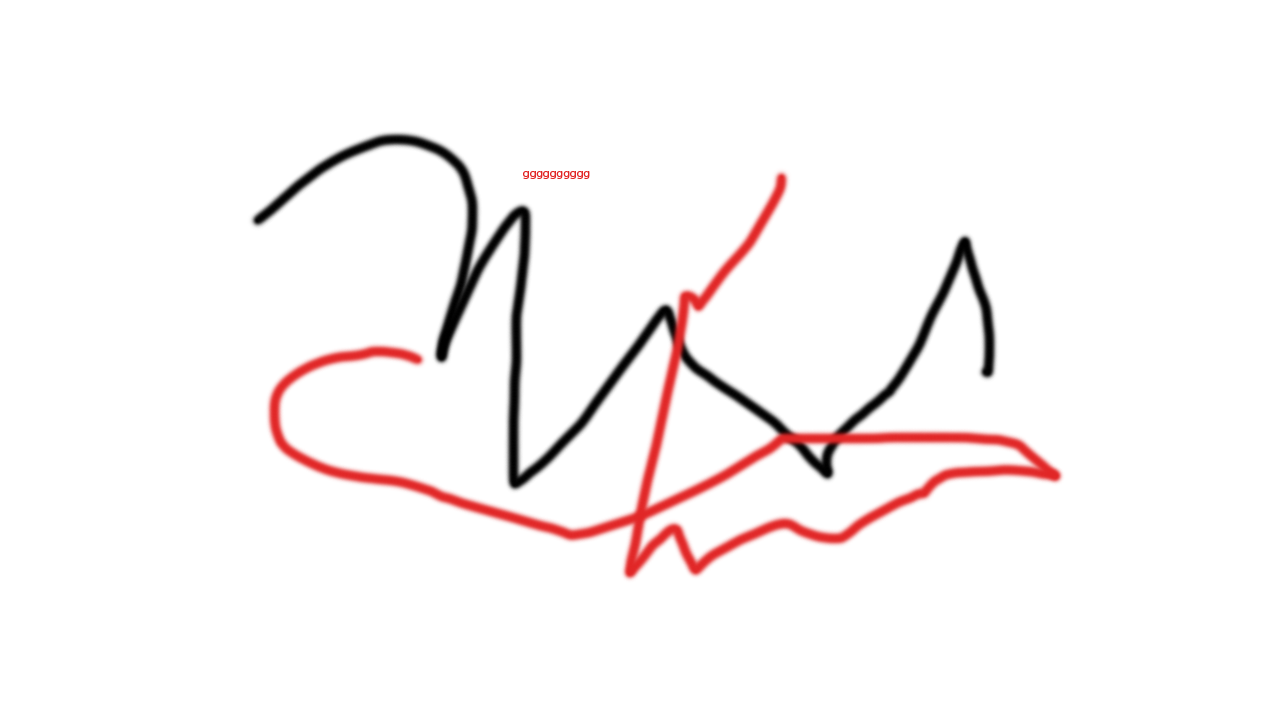
<style>
.page{position:relative;width:1280px;height:720px;background:#ffffff}
.page>*{position:absolute;margin:0}
.t1{font:12px "MyriadPro-Regular";color:#e12626}
</style>
<div class="page">
<p class="t1" style="left:523px;top:171px;width:67px;height:8px">gggggggggg</p>
</div>
